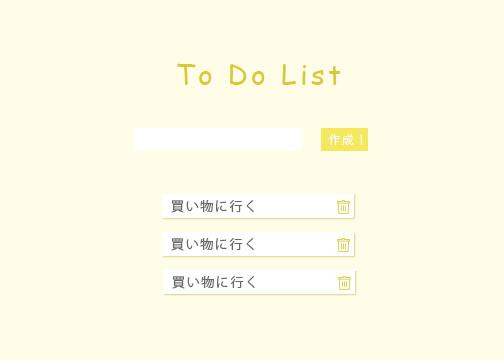
<style>
.page{position:relative;width:504px;height:360px;background:#fffde7}
.page>*{position:absolute;margin:0}
.t1{font:28px "ComicSansMS";letter-spacing:0.12em;color:#d7ca36}
.t2{font:12px "Jun101Pro-Light";letter-spacing:0.12em;color:#ffffff}
.t3{font:13px "KozGoPr6N-Regular";letter-spacing:0.12em;color:#666666}
</style>
<div class="page">
<p class="t1" style="left:177px;top:63px;width:164px;height:22px">To Do List</p>
<p class="t2" style="left:328px;top:133px;width:35px;height:13px">作成！</p>
<p class="t3" style="left:171px;top:200px;width:83px;height:13px">買い物に行く</p>
<p class="t3" style="left:171px;top:238px;width:83px;height:13px">買い物に行く</p>
<p class="t3" style="left:172px;top:276px;width:83px;height:13px">買い物に行く</p>
</div>
